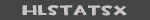
<style>
.page{position:relative;width:150px;height:20px;background:#454543}
.page>*{position:absolute;margin:0}
.t1{font:14px "TF2Build";letter-spacing:0.03em;color:#c8c4c4;scale:1.39 1}
</style>
<div class="page">
<p class="t1" style="left:22px;top:5px;width:105px;height:11px">hlstatsx</p>
</div>
